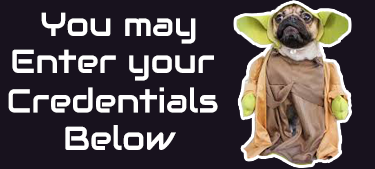
<style>
.page{position:relative;width:375px;height:169px;background:#18121e}
.page>*{position:absolute;margin:0}
.t1{font:33.3px/291.7px "Audiowide-Regular";color:#ffffff}
.t2{font:33.3px "Audiowide-Regular";color:#ffffff}
</style>
<div class="page">
<p class="t1" style="left:41px;top:12px;width:155px;height:32px;text-align:center">You may<br> enter</p>
<p class="t2" style="left:12px;top:49px;width:202px;height:32px">Enter your</p>
<p class="t2" style="left:8px;top:87px;width:210px;height:26px">Credentials</p>
<p class="t2" style="left:65px;top:125px;width:111px;height:25px">Below</p>
</div>
